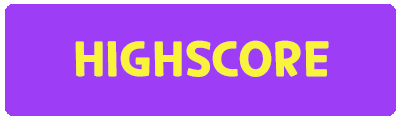
<style>
.page{position:relative;width:401px;height:120px;background:#9d3ef6}
.page>*{position:absolute;margin:0}
.t1{font:48px "CookieRun-Bold";color:#faf33c}
</style>
<div class="page">
<p class="t1" style="left:75px;top:40px;width:254px;height:37px">HIGHSCORE</p>
</div>
